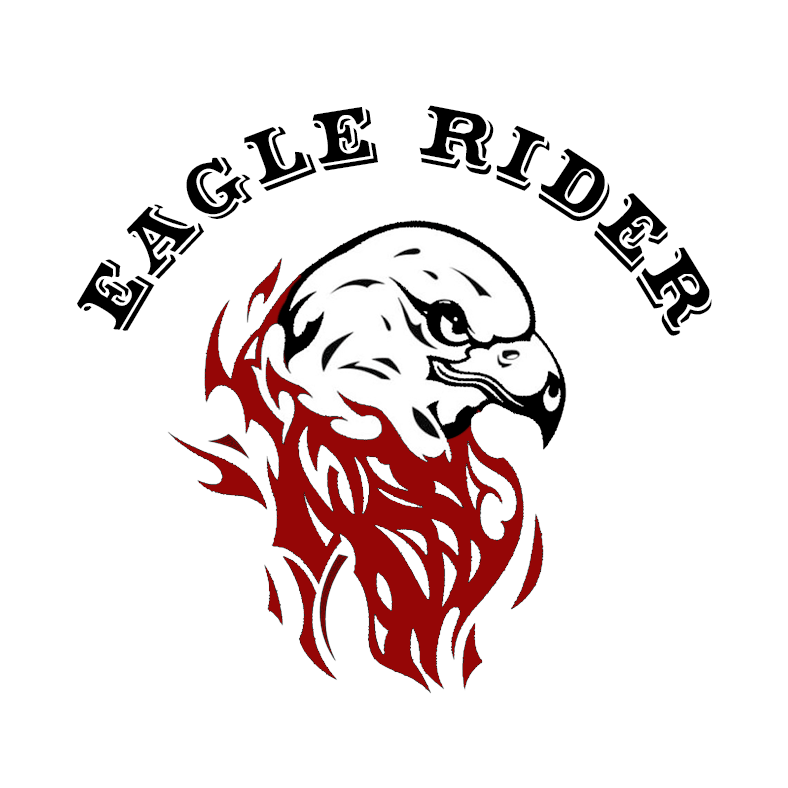
<style>
.page{position:relative;width:788px;height:788px;background:#ffffff}
.page>*{position:absolute;margin:0}
.t1{font:72px "Shadowed-Serif";color:#000000}
</style>
<div class="page">
<p class="t1" style="left:77px;top:105px;width:635px;height:231px">Eagle Rider</p>
</div>
